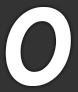
<style>
.page{position:relative;width:78px;height:92px;background:#333333}
.page>*{position:absolute;margin:0}
.t1{font:109.6px "ProductSans-BoldItalic";color:#ffffff}
</style>
<div class="page">
<p class="t1" style="left:5px;top:7px;width:66px;height:79px">0</p>
</div>
